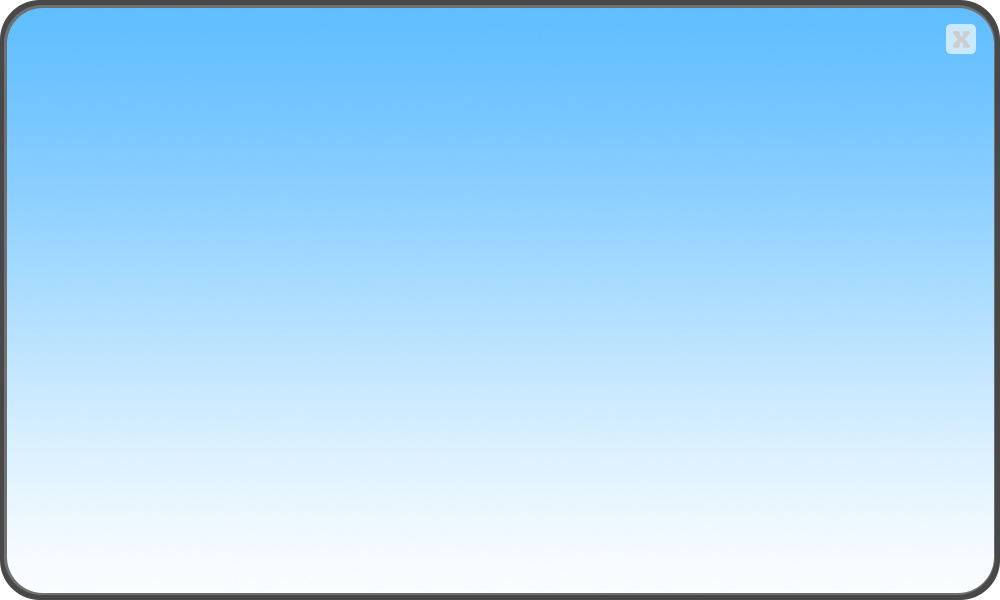
<style>
.page{position:relative;width:1000px;height:600px}
.page>*{position:absolute;margin:0}
.t1{font:33.5px "Gorditas-Bold";color:#cdcdcd;font-variant:small-caps}
</style>
<div class="page">
<p class="t1" style="left:952px;top:31px;width:18px;height:17px">x</p>
</div>
